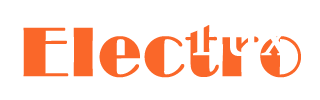
<style>
.page{position:relative;width:320px;height:100px;background:#ffffff}
.page>*{position:absolute;margin:0}
.t1{font:72px "Broadway";color:#fa6729;font-weight:bold}
</style>
<div class="page">
<p class="t1" style="left:23px;top:25px;width:278px;height:53px">Electro</p>
</div>
